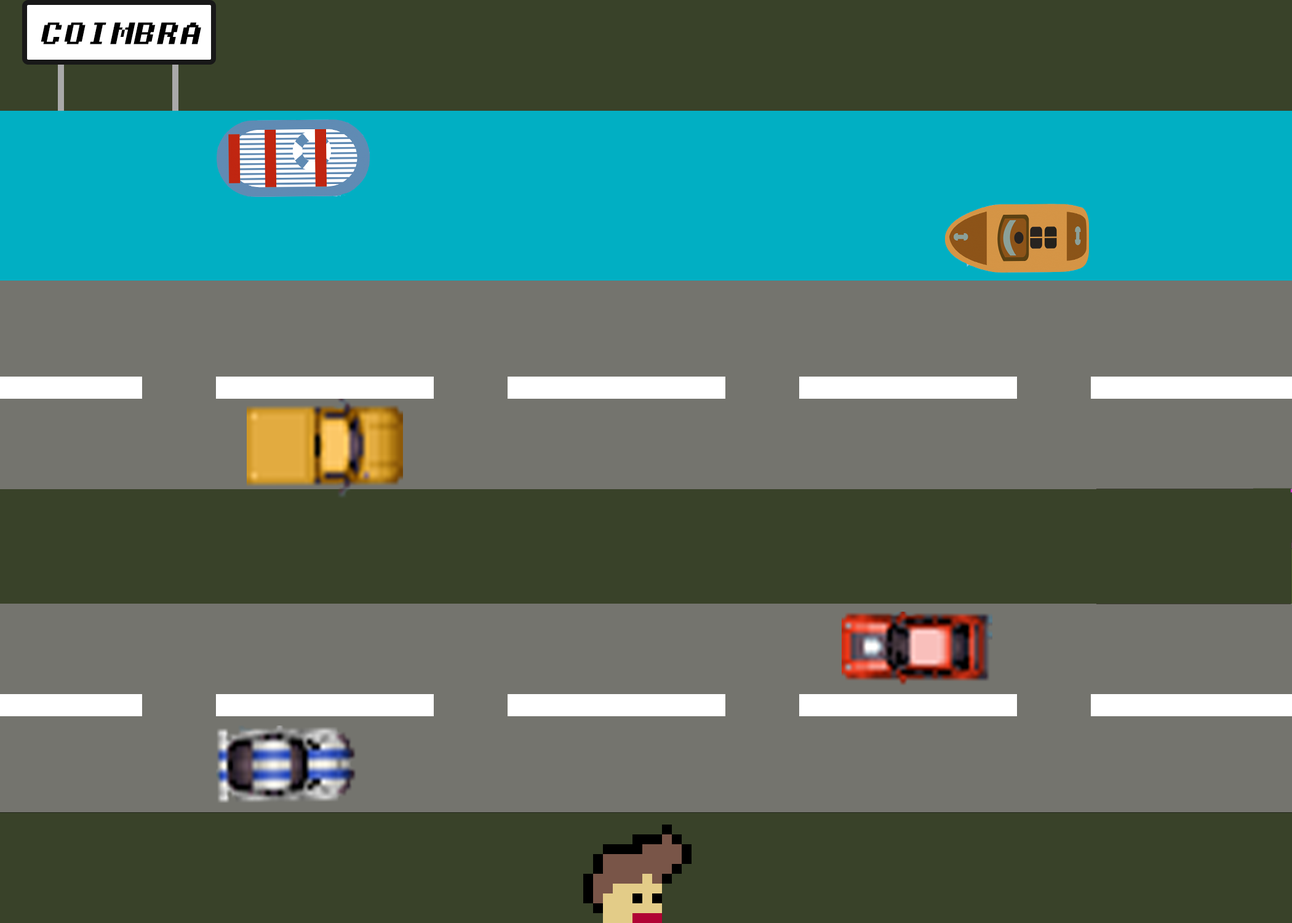
<style>
.page{position:relative;width:1292px;height:923px;background:#74746e}
.page>*{position:absolute;margin:0}
.t1{font:30.8px "Fixedsys";color:#000000;font-style:italic;scale:1.21 1}
</style>
<div class="page">
<p class="t1" style="left:41px;top:22px;width:160px;height:22px">COIMBRA</p>
</div>
